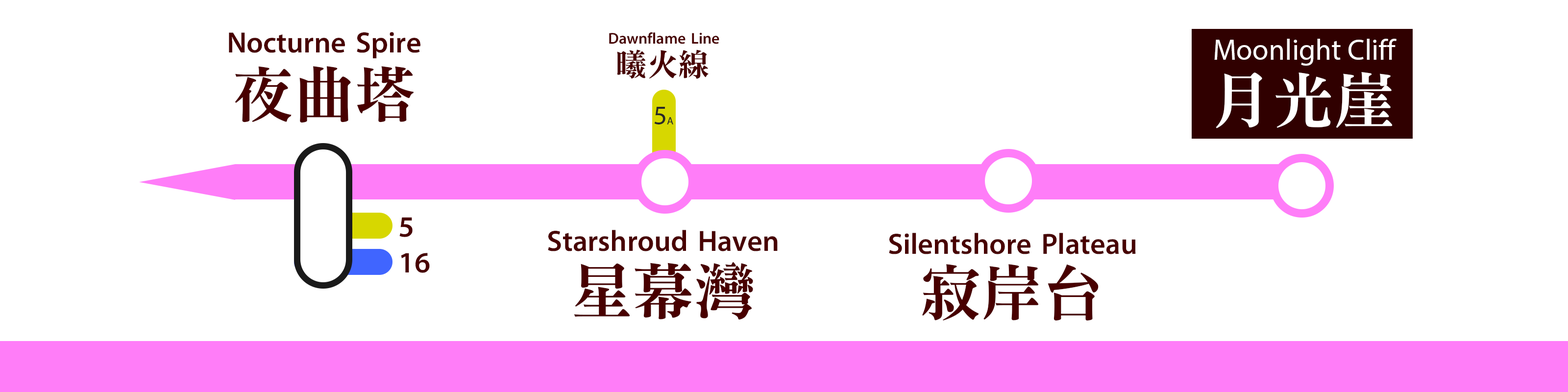
<style>
.page{position:relative;width:1568px;height:392px;background:#ffffff}
.page>*{position:absolute;margin:0}
.t1{font:29.4px "MTR-Sung";color:#480000}
.t2{font:15.7px "MTR-Sung";color:#480000}
.t3{font:29.4px "MyriadPro-Regular";color:#ffffff}
.t4{font:31.4px "MTR-Sung";color:#480000}
.t5{font:61.2px "MTR-Sung";color:#480000}
.t6{font:61.2px "MTR-Sung";color:#ffffff}
.t7{font:27px "MyriadPro-Regular";color:#282828}
.t8{font:10.8px "MyriadPro-Regular";color:#282828}
.t9{font:29.6px "MTR-Sung";color:#480000}
</style>
<div class="page">
<p class="t1" style="left:229px;top:32px;width:191px;height:26px">Nocturne Spire</p>
<p class="t2" style="left:609px;top:32px;width:110px;height:12px">Dawnflame Line</p>
<p class="t3" style="left:1214px;top:39px;width:182px;height:27px">Moonlight Cliff</p>
<p class="t4" style="left:617px;top:49px;width:92px;height:30px">曦火線</p>
<p class="t5" style="left:235px;top:66px;width:179px;height:57px">夜曲塔</p>
<p class="t6" style="left:1216px;top:72px;width:177px;height:56px">月光崖</p>
<p class="t7" style="left:654px;top:107px;width:19px;height:17px">5<span class="t8">A</span></p>
<p class="t9" style="left:399px;top:217px;width:31px;height:56px">5<br>16</p>
<p class="t1" style="left:548px;top:230px;width:230px;height:21px">Starshroud Haven</p>
<p class="t1" style="left:889px;top:233px;width:247px;height:21px">Silentshore Plateau</p>
<p class="t5" style="left:574px;top:262px;width:179px;height:58px">星幕灣</p>
<p class="t5" style="left:922px;top:264px;width:177px;height:57px">寂岸台</p>
</div>
